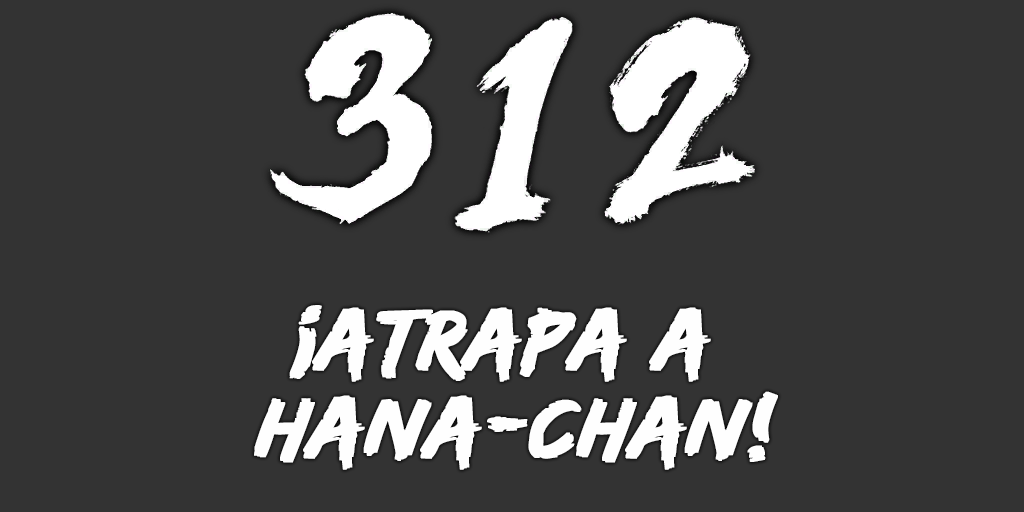
<style>
.page{position:relative;width:1024px;height:512px;background:#333333}
.page>*{position:absolute;margin:0}
.t1{font:88px/88px "EdoSZ";color:#fefefe;font-weight:bold;font-style:italic;scale:1.04 1}
</style>
<div class="page">
<p class="t1" style="left:254px;top:305px;width:524px;height:165px;text-align:center">¡atrapa a <br>hana-chan!</p>
</div>
